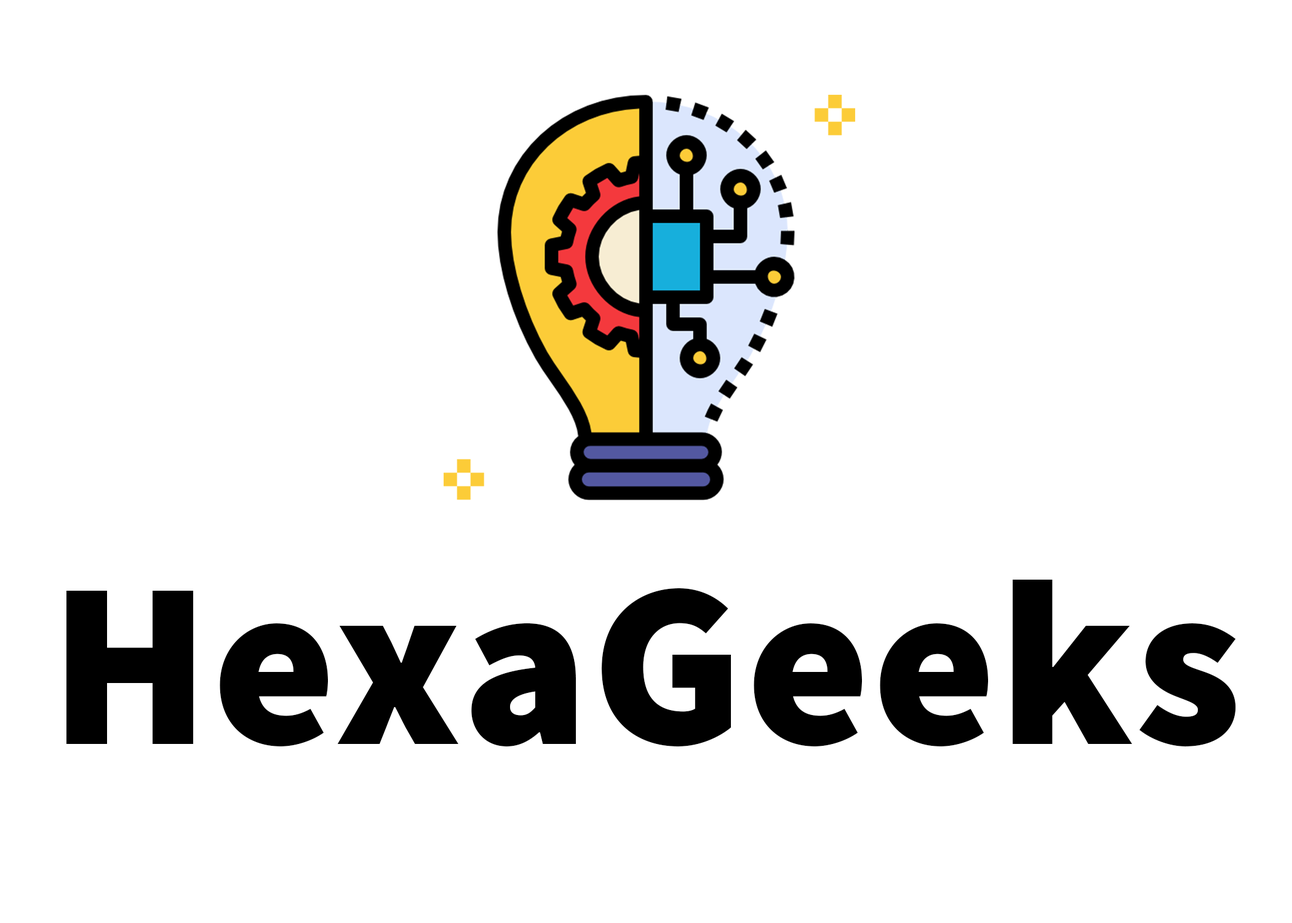
<style>
.page{position:relative;width:1292px;height:923px;background:#ffffff}
.page>*{position:absolute;margin:0}
.t1{font:235.9px "SourceSansPro-Black";letter-spacing:0.01em;color:#000000}
</style>
<div class="page">
<p class="t1" style="left:66px;top:580px;width:1170px;height:166px">HexaGeeks</p>
</div>
